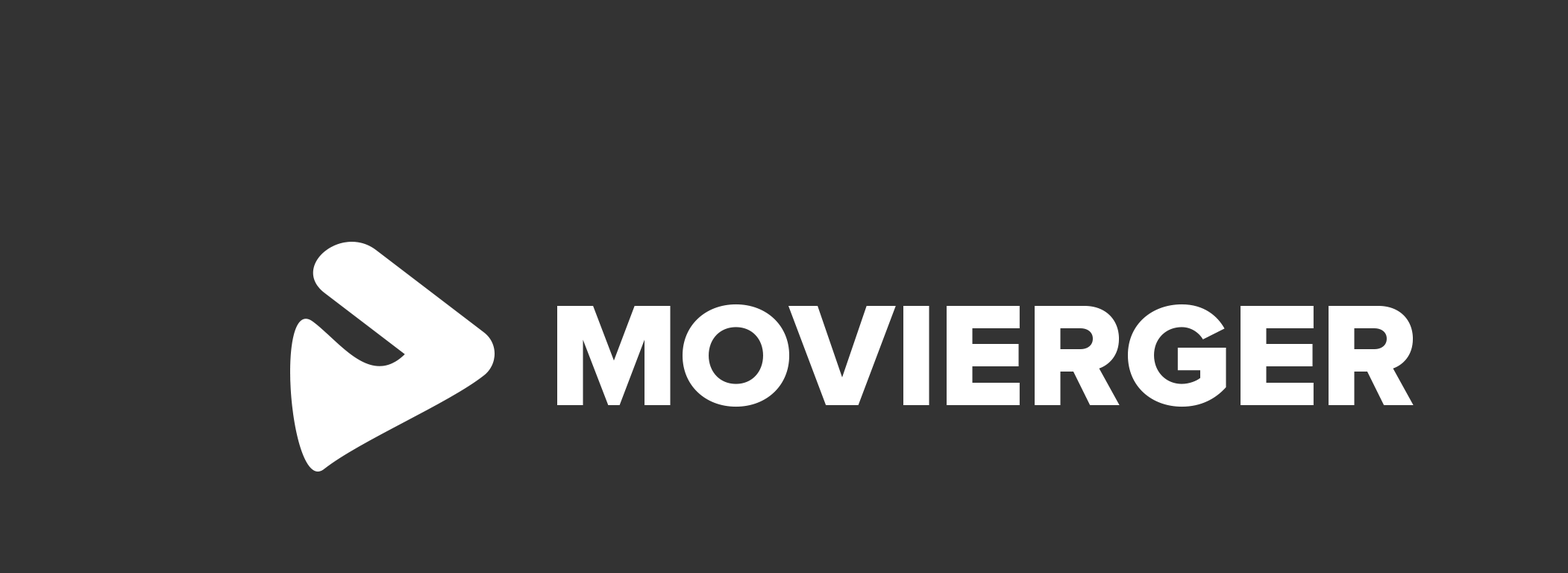
<style>
.page{position:relative;width:1568px;height:573px;background:#333333}
.page>*{position:absolute;margin:0}
.t1{font:149.2px "ProximaNova-Extrabld";color:#ffffff;text-transform:uppercase}
</style>
<div class="page">
<p class="t1" style="left:557px;top:304px;width:857px;height:103px">movierger</p>
</div>
